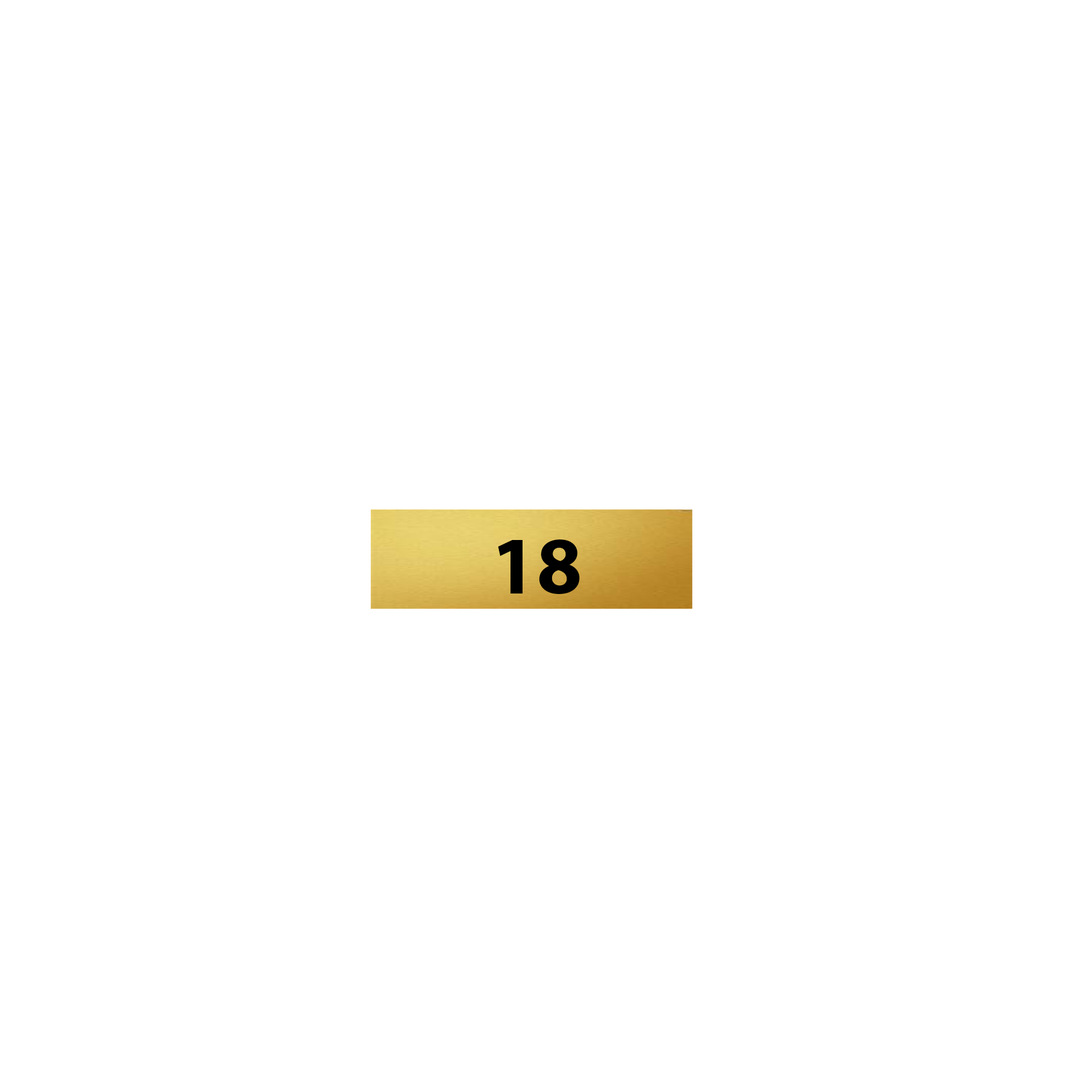
<style>
.page{position:relative;width:1092px;height:1092px;background:#ffffff}
.page>*{position:absolute;margin:0}
.t1{font:81.9px "MyriadPro-Bold";color:#000000}
</style>
<div class="page">
<p class="t1" style="left:498px;top:539px;width:82px;height:55px">18</p>
</div>
